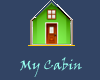
<style>
.page{position:relative;width:100px;height:80px;background:#324464}
.page>*{position:absolute;margin:0}
.t1{font:13.3px "VinerHandITC";color:#95feee}
</style>
<div class="page">
<p class="t1" style="left:20px;top:57px;width:62px;height:20px">My Cabin</p>
</div>
